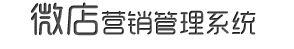
<style>
.page{position:relative;width:294px;height:49px;background:#ffffff}
.page>*{position:absolute;margin:0}
.t1{font:26px "RTWSYueRoudGoDemo-Regular"}
.t2{font:36px "RTWSYueRoudGoDemo-Regular"}
</style>
<div class="page">
<p class="t1" style="left:31px;top:2px;width:225px;height:34px"><span class="t2">微店</span>营销管理系统</p>
</div>
